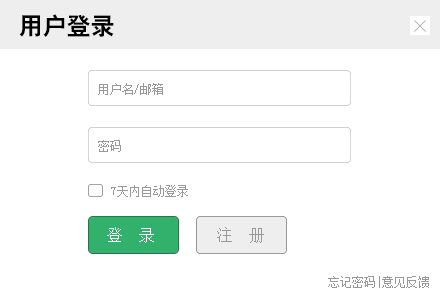
<style>
.page{position:relative;width:440px;height:308px;background:#ffffff}
.page>*{position:absolute;margin:0}
.t1{font:24px "HeitiCSEG";color:#000000}
.t2{font:12px "SimSun";color:#999999}
.t3{font:16px "SimSun";color:#ffffff}
.t4{font:16px "SimSun";color:#999999}
</style>
<div class="page">
<p class="t1" style="left:19px;top:14px;width:95px;height:23px">用户登录</p>
<p class="t2" style="left:98px;top:83px;width:65px;height:12px">用户名/邮箱</p>
<p class="t2" style="left:98px;top:140px;width:23px;height:12px">密码</p>
<p class="t2" style="left:111px;top:185px;width:77px;height:12px">7天内自动登录</p>
<p class="t3" style="left:107px;top:227px;width:47px;height:16px">登  录</p>
<p class="t4" style="left:217px;top:227px;width:47px;height:16px">注  册</p>
<p class="t2" style="left:328px;top:276px;width:101px;height:12px">忘记密码|意见反馈</p>
</div>
